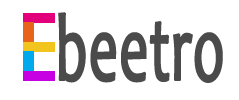
<style>
.page{position:relative;width:239px;height:100px;background:#ffffff}
.page>*{position:absolute;margin:0}
.t1{font:96.2px "Candara";color:#4b4b4b;font-weight:bold;scale:0.59 1}
</style>
<div class="page">
<p class="t1" style="left:58px;top:12px;width:165px;height:71px">beetro</p>
</div>
